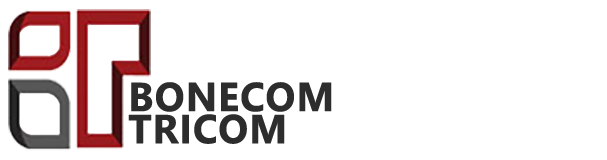
<style>
.page{position:relative;width:607px;height:160px;background:#ffffff}
.page>*{position:absolute;margin:0}
.t1{font:40.2px/32.1px "SegoeUI-Bold";color:#2d2d2d;font-weight:bold}
</style>
<div class="page">
<p class="t1" style="left:128px;top:82px;width:204px;height:62px">BONECOM<br>TRICOM</p>
</div>
